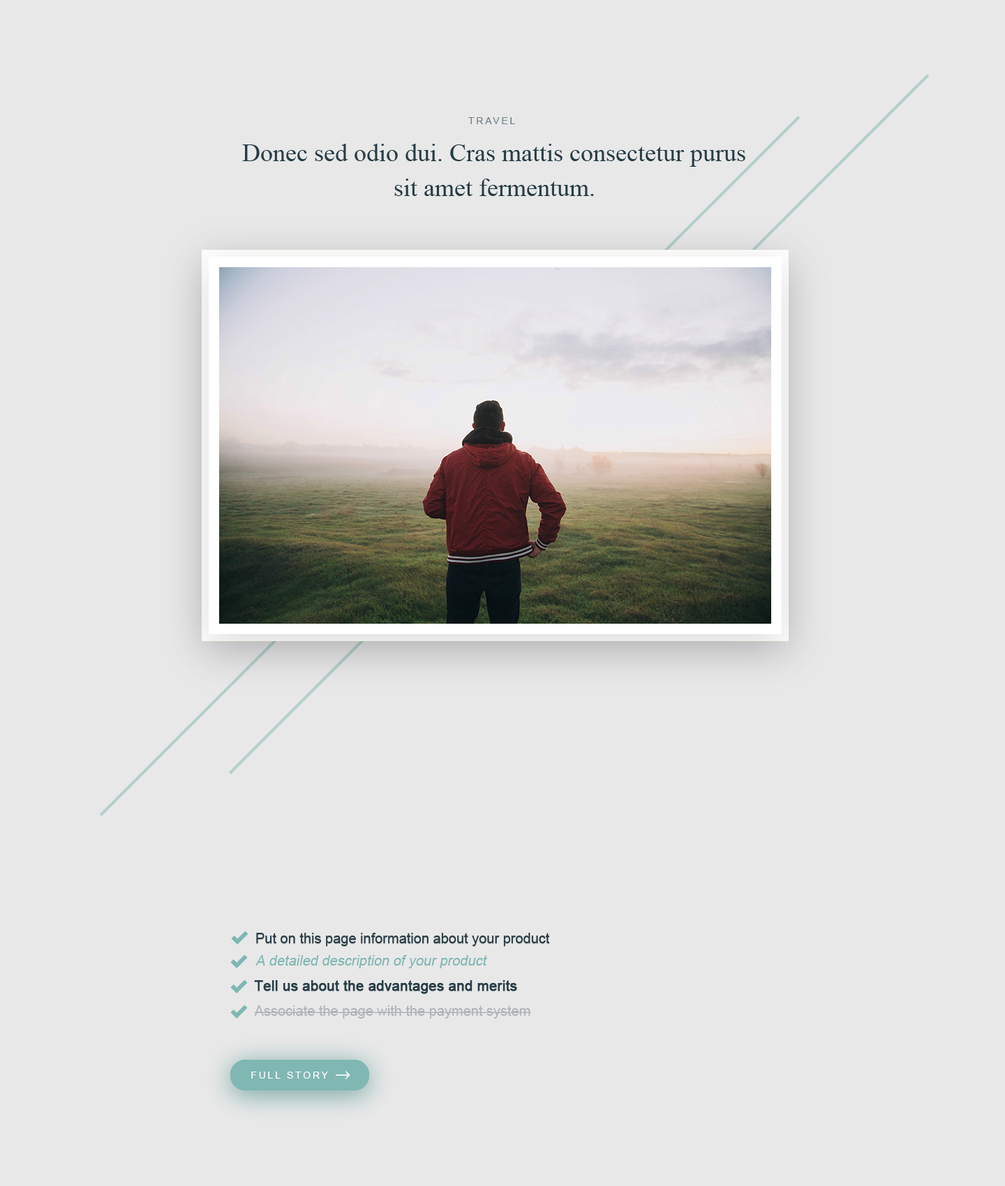
<style>
.page{position:relative;width:1005px;height:1186px;background:#e8e8e8}
.page>*{position:absolute;margin:0}
.t1{font:9.8px "ArialMT";letter-spacing:0.2em;color:#748187;text-transform:uppercase}
.t2{font:25.1px/34.9px "TimesNewRomanPSMT";color:#273d46}
.t3{font:14px "ArialMT";color:#273d46}
.t4{font:14px "ArialMT";color:#80b7b3;font-style:italic}
.t5{font:14px "ArialMT";color:#273d46;font-weight:bold}
.t6{font:14px "ArialMT";color:#aeb4b7}
.t7{font:9.8px "ArialMT";letter-spacing:0.2em;color:#ffffff;text-transform:uppercase}
</style>
<div class="page">
<p class="t1" style="left:468px;top:117px;width:47px;height:7px">Travel</p>
<p class="t2" style="left:242px;top:144px;width:503px;height:52px;text-align:center">Donec sed odio dui. Cras mattis consectetur purus sit amet fermentum.</p>
<p class="t3" style="left:256px;top:933px;width:294px;height:13px">Put on this page information about your product</p>
<p class="t4" style="left:255px;top:955px;width:232px;height:14px">A detailed description of your product</p>
<p class="t5" style="left:254px;top:981px;width:263px;height:14px">Tell us about the advantages and merits</p>
<p class="t6" style="left:254px;top:1006px;width:277px;height:13px">Associate the page with the payment system</p>
<p class="t7" style="left:251px;top:1072px;width:77px;height:7px">Full Story</p>
</div>
